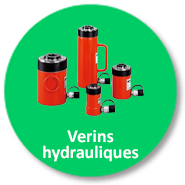
<style>
.page{position:relative;width:185px;height:185px;background:#00cc66}
.page>*{position:absolute;margin:0}
.t1{font:18px/16px "Calibri-Bold";color:#ffffff}
</style>
<div class="page">
<p class="t1" style="left:43px;top:130px;width:96px;height:32px;text-align:center">Verins  <br>hydrauliques</p>
</div>
